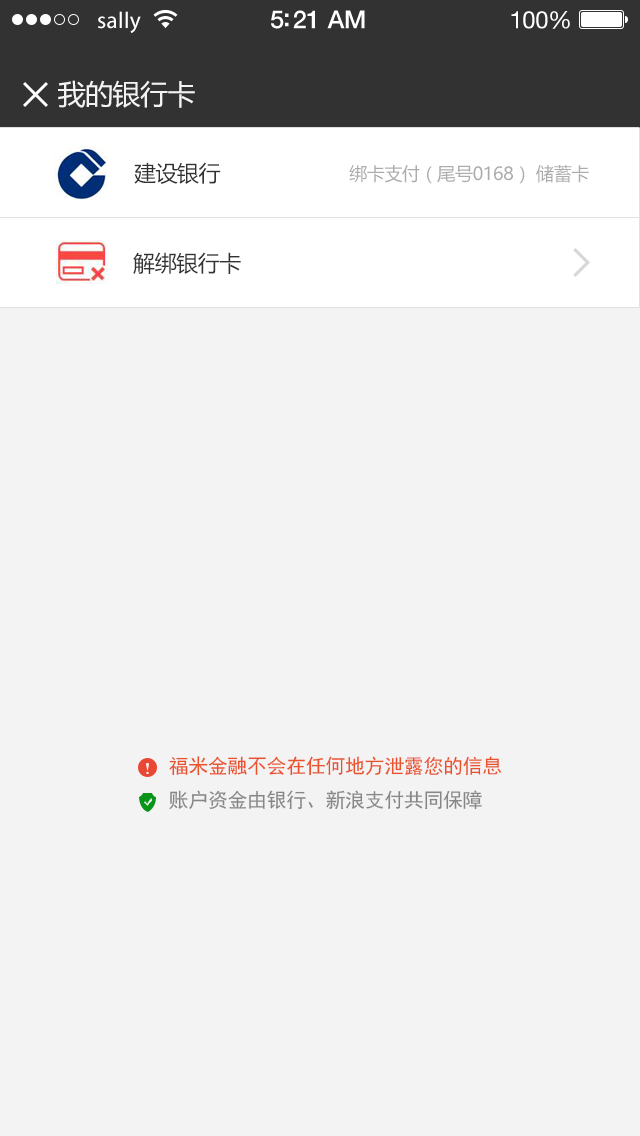
<style>
.page{position:relative;width:640px;height:1136px;background:#f3f3f3}
.page>*{position:absolute;margin:0}
.t1{font:23px "MyriadPro-Regular";letter-spacing:0.02em;color:#ffffff}
.t2{font:25px "HelveticaNeue-Medium";letter-spacing:-0.02em;color:#ffffff}
.t3{font:24px "HelveticaNeue";letter-spacing:-0.02em;color:#ffffff}
.t4{font:28px "MicrosoftYaHei";letter-spacing:-0.02em;color:#f3f3f3}
.t5{font:22px "MicrosoftYaHei";letter-spacing:-0.02em;color:#323232}
.t6{font:18px "MicrosoftYaHei";letter-spacing:-0.02em;color:#acacac}
.t7{font:20px "SimHei";letter-spacing:-0.02em;color:#ea522b}
.t8{font:20px "SimHei";letter-spacing:-0.02em;color:#878787}
</style>
<div class="page">
<p class="t1" style="left:98px;top:11px;width:43px;height:22px">sally</p>
<p class="t2" style="left:271px;top:10px;width:94px;height:19px">5:21 AM</p>
<p class="t3" style="left:511px;top:11px;width:59px;height:18px">100%</p>
<p class="t4" style="left:58px;top:80px;width:137px;height:28px">我的银行卡</p>
<p class="t5" style="left:134px;top:162px;width:87px;height:22px">建设银行</p>
<p class="t6" style="left:349px;top:165px;width:240px;height:19px">绑卡支付（尾号0168） 储蓄卡</p>
<p class="t5" style="left:133px;top:252px;width:108px;height:22px">解绑银行卡</p>
<p class="t7" style="left:169px;top:756px;width:333px;height:20px">福米金融不会在任何地方泄露您的信息</p>
<p class="t8" style="left:169px;top:790px;width:313px;height:20px">账户资金由银行、新浪支付共同保障</p>
</div>
